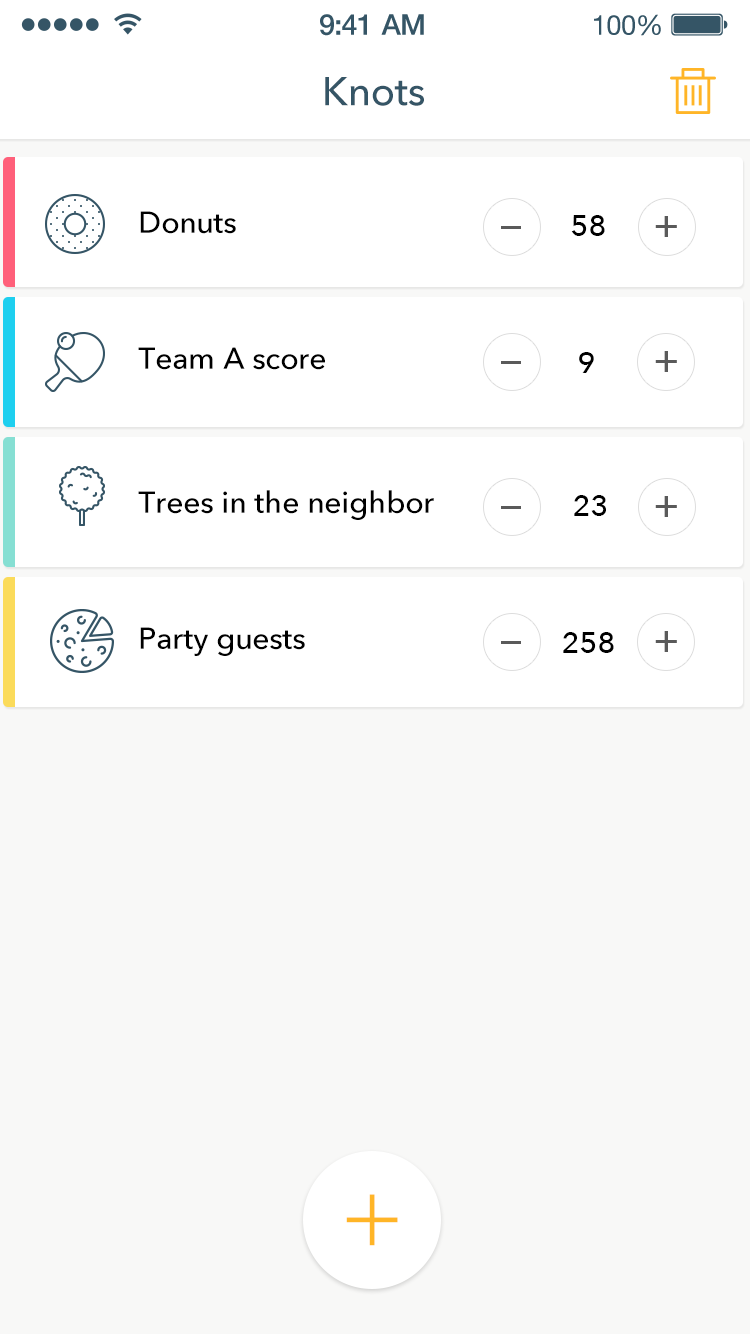
<style>
.page{position:relative;width:750px;height:1334px;background:#f8f8f7}
.page>*{position:absolute;margin:0}
.t1{font:28.8px "HelveticaNeue-Medium";letter-spacing:-0.02em;color:#355566}
.t2{font:27.6px "HelveticaNeue";letter-spacing:-0.02em;color:#355566}
.t3{font:40px "AvenirNext-Medium";color:#355566}
.t4{font:30px "AvenirNext-Medium";color:#000000}
.t5{font:40px "AvenirNext-Medium";color:#5a5a5a}
.t6{font:100px "Avenir-Light";color:#ffb527}
</style>
<div class="page">
<p class="t1" style="left:320px;top:14px;width:104px;height:22px">9:41 AM</p>
<p class="t2" style="left:594px;top:14px;width:67px;height:22px">100%</p>
<p class="t3" style="left:325px;top:77px;width:99px;height:29px">Knots</p>
<p class="t4" style="left:140px;top:211px;width:96px;height:23px">Donuts</p>
<p class="t4" style="left:571px;top:215px;width:34px;height:21px">58</p>
<p class="t5" style="left:655px;top:216px;width:22px;height:21px">+</p>
<p class="t4" style="left:138px;top:347px;width:187px;height:23px">Team A score</p>
<p class="t4" style="left:579px;top:352px;width:15px;height:21px">9</p>
<p class="t5" style="left:655px;top:351px;width:22px;height:21px">+</p>
<p class="t4" style="left:138px;top:490px;width:296px;height:30px">Trees in the neighbor</p>
<p class="t4" style="left:574px;top:495px;width:32px;height:21px">23</p>
<p class="t5" style="left:655px;top:496px;width:22px;height:21px">+</p>
<p class="t4" style="left:140px;top:627px;width:165px;height:29px">Party guests</p>
<p class="t4" style="left:563px;top:632px;width:51px;height:21px">258</p>
<p class="t5" style="left:655px;top:631px;width:22px;height:21px">+</p>
<p class="t6" style="left:346px;top:1194px;width:52px;height:52px">+</p>
</div>
